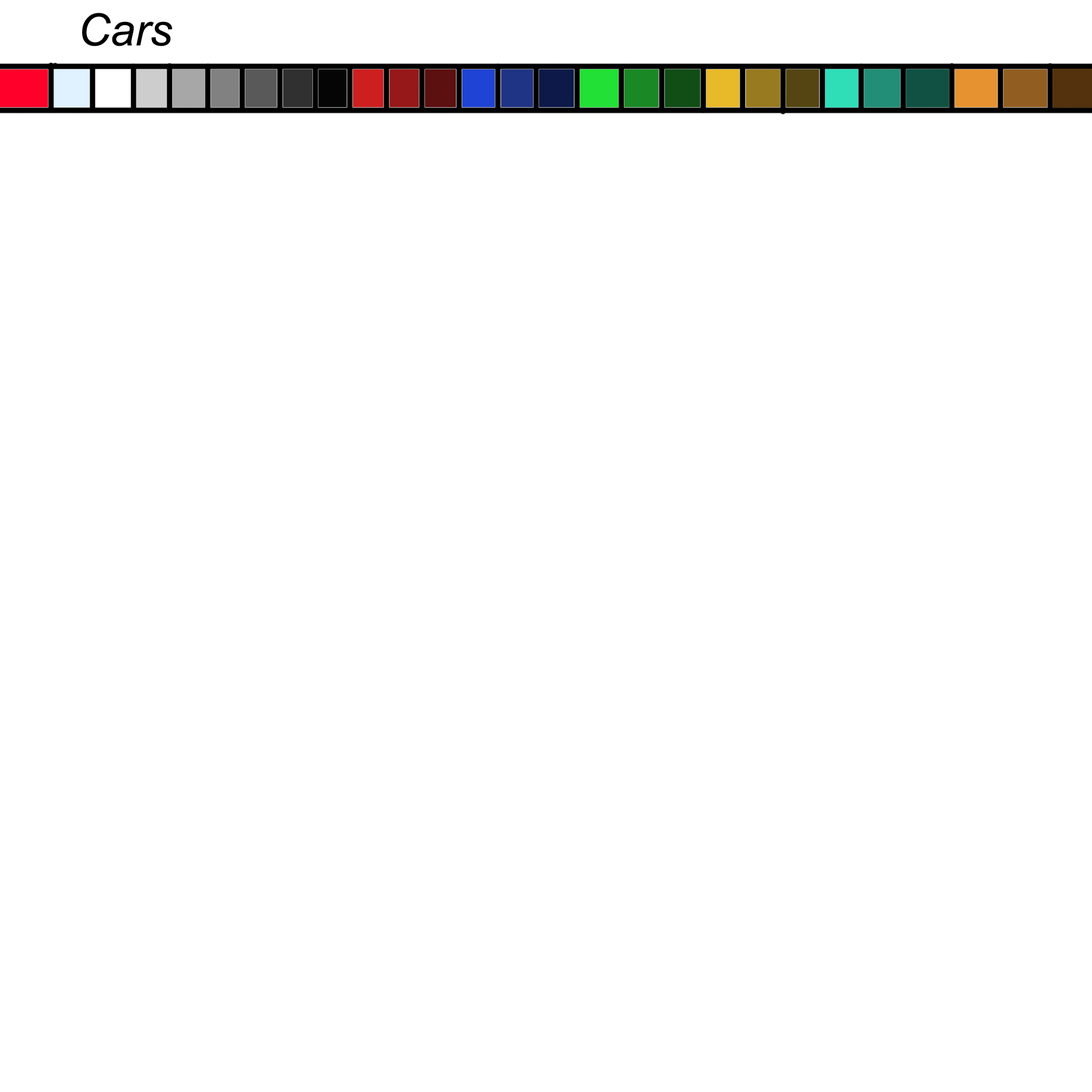
<style>
.page{position:relative;width:1092px;height:1092px;background:#ffffff}
.page>*{position:absolute;margin:0}
.t1{font:44.4px "Arial-ItalicMT";color:#000000}
</style>
<div class="page">
<p class="t1" style="left:82px;top:13px;width:90px;height:33px">Cars</p>
</div>
